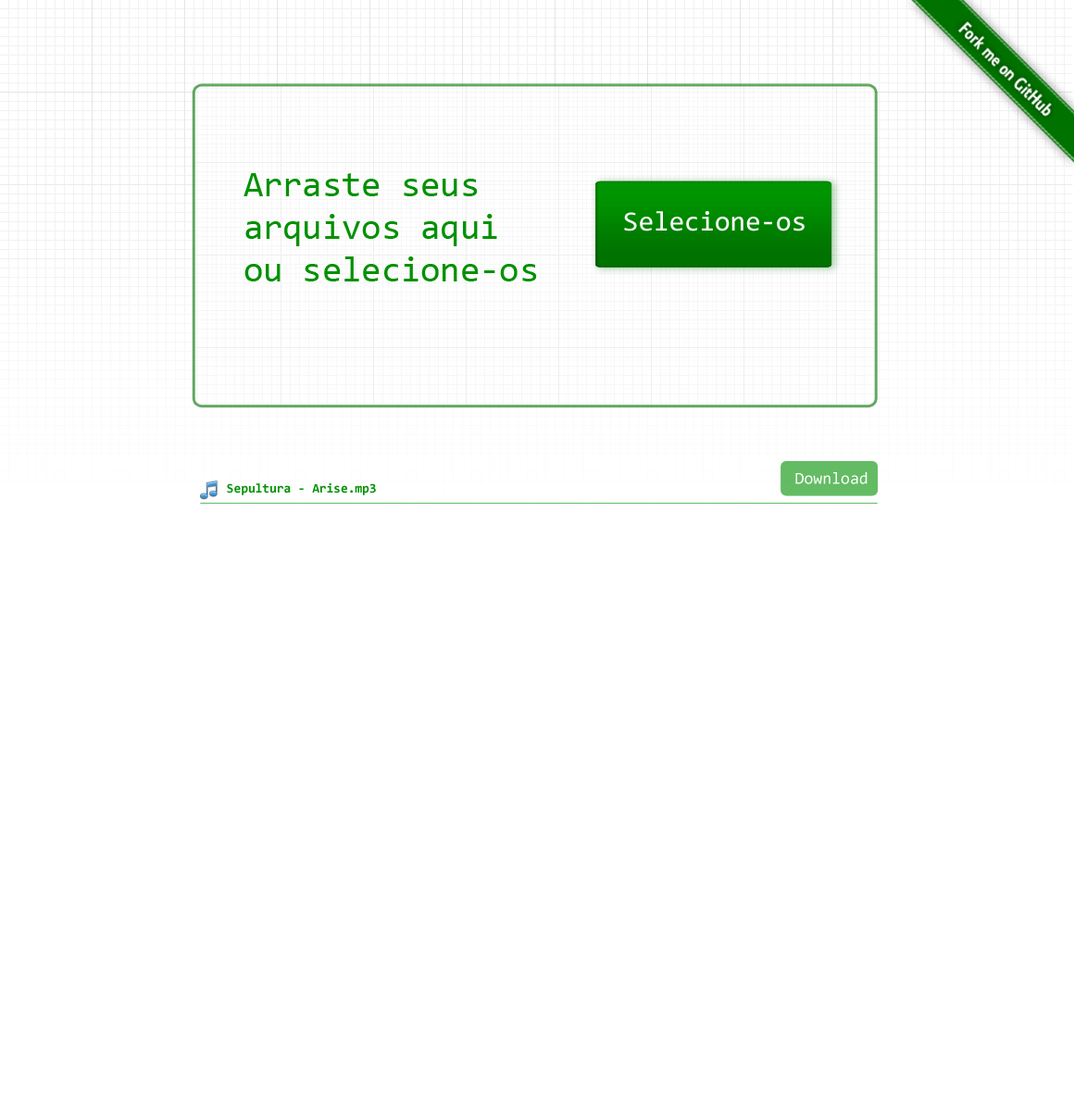
<style>
.page{position:relative;width:1074px;height:1111px;background:#ffffff}
.page>*{position:absolute;margin:0}
.t1{font:35.8px "Consolas";color:#009100}
.t2{font:27.8px "Consolas";color:#ffffff}
.t3{font:16.7px "Consolas";color:#ffffff}
.t4{font:13px "Consolas-Bold";color:#009200}
</style>
<div class="page">
<p class="t1" style="left:243px;top:173px;width:294px;height:108px">Arraste seus <br>arquivos aqui<br>ou selecione-os</p>
<p class="t2" style="left:624px;top:211px;width:180px;height:20px">Selecione-os</p>
<p class="t3" style="left:795px;top:472px;width:72px;height:12px">Download</p>
<p class="t4" style="left:227px;top:483px;width:149px;height:12px">Sepultura - Arise.mp3</p>
</div>
